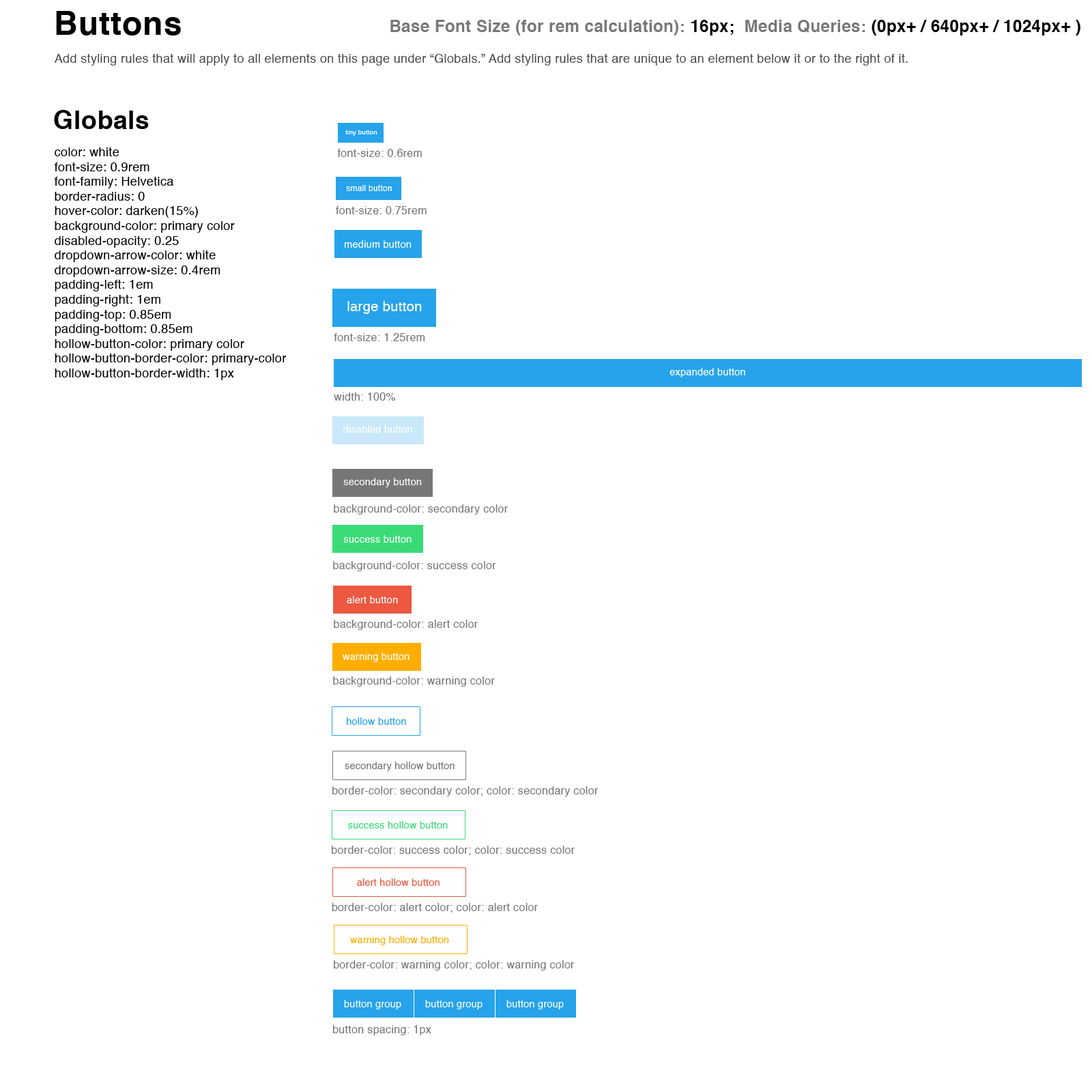
<style>
.page{position:relative;width:1092px;height:1092px;background:#ffffff}
.page>*{position:absolute;margin:0}
.t1{font:32.8px "Helvetica-Bold";letter-spacing:0.02em;color:#000000}
.t2{font:16.4px "Helvetica-Bold";letter-spacing:0.02em;color:#777777}
.t3{font:16.4px "Helvetica-Bold";letter-spacing:0.02em;color:#000000}
.t4{font:12.3px "Helvetica";letter-spacing:0.02em;color:#494949}
.t5{font:25.4px "Helvetica-Bold";letter-spacing:0.02em;color:#000000}
.t6{font:6.6px "Helvetica";letter-spacing:0.02em;color:#ffffff}
.t7{font:12.3px "Helvetica";letter-spacing:0.02em;color:#000000}
.t8{font:10.9px "Helvetica";letter-spacing:0.02em;color:#747474}
.t9{font:8.2px "Helvetica";letter-spacing:0.02em;color:#ffffff}
.t10{font:9.8px "Helvetica";letter-spacing:0.02em;color:#ffffff}
.t11{font:13.6px "Helvetica";letter-spacing:0.02em;color:#ffffff}
.t12{font:9.8px "Helvetica";letter-spacing:0.02em;color:#26a3eb}
.t13{font:9.8px "Helvetica";letter-spacing:0.02em;color:#777777}
.t14{font:9.8px "Helvetica";letter-spacing:0.02em;color:#3adb76}
.t15{font:9.8px "Helvetica";letter-spacing:0.02em;color:#ec5840}
.t16{font:9.8px "Helvetica";letter-spacing:0.02em;color:#ffae00}
</style>
<div class="page">
<p class="t1" style="left:56px;top:11px;width:125px;height:24px">Buttons</p>
<p class="t2" style="left:390px;top:20px;width:690px;height:15px">Base Font Size (for rem calculation): <span class="t3">16px;</span>  Media Queries:<span class="t3"> (0px+ / 640px+ / 1024px+ )</span></p>
<p class="t4" style="left:55px;top:54px;width:853px;height:12px">Add styling rules that will apply to all elements on this page under “Globals.” Add styling rules that are unique to an element below it or to the right of it.</p>
<p class="t5" style="left:54px;top:110px;width:95px;height:19px">Globals</p>
<p class="t6" style="left:345px;top:130px;width:32px;height:6px">tiny button</p>
<p class="t7" style="left:54px;top:147px;width:233px;height:233px">color: white<br>font-size: 0.9rem<br>font-family: Helvetica<br>border-radius: 0<br>hover-color: darken(15%)<br>background-color: primary color<br>disabled-opacity: 0.25<br>dropdown-arrow-color: white<br>dropdown-arrow-size: 0.4rem<br>padding-left: 1em<br>padding-right: 1em<br>padding-top: 0.85em<br>padding-bottom: 0.85em<br>hollow-button-color: primary color<br>hollow-button-border-color: primary-color<br>hollow-button-border-width: 1px</p>
<p class="t8" style="left:337px;top:149px;width:85px;height:8px">font-size: 0.6rem</p>
<p class="t9" style="left:346px;top:185px;width:46px;height:6px">small button</p>
<p class="t8" style="left:336px;top:206px;width:91px;height:8px">font-size: 0.75rem</p>
<p class="t10" style="left:345px;top:240px;width:67px;height:8px">medium button</p>
<p class="t11" style="left:347px;top:301px;width:75px;height:13px">large button</p>
<p class="t8" style="left:334px;top:333px;width:91px;height:8px">font-size: 1.25rem</p>
<p class="t10" style="left:670px;top:368px;width:75px;height:9px">expanded button</p>
<p class="t8" style="left:334px;top:392px;width:62px;height:9px">width: 100%</p>
<p class="t10" style="left:343px;top:425px;width:69px;height:8px">disabled button</p>
<p class="t10" style="left:343px;top:478px;width:79px;height:9px">secondary button</p>
<p class="t8" style="left:334px;top:504px;width:174px;height:11px">background-color: secondary color</p>
<p class="t10" style="left:344px;top:535px;width:68px;height:8px">success button</p>
<p class="t8" style="left:333px;top:561px;width:163px;height:10px">background-color: success color</p>
<p class="t10" style="left:347px;top:596px;width:51px;height:7px">alert button</p>
<p class="t8" style="left:334px;top:620px;width:144px;height:10px">background-color: alert color</p>
<p class="t10" style="left:343px;top:652px;width:66px;height:10px">warning button</p>
<p class="t8" style="left:333px;top:676px;width:162px;height:11px">background-color: warning color</p>
<p class="t12" style="left:347px;top:717px;width:59px;height:8px">hollow button</p>
<p class="t13" style="left:345px;top:762px;width:110px;height:9px">secondary hollow button</p>
<p class="t8" style="left:332px;top:786px;width:267px;height:10px">border-color: secondary color; color: secondary color</p>
<p class="t14" style="left:348px;top:821px;width:100px;height:8px">success hollow button</p>
<p class="t8" style="left:332px;top:846px;width:243px;height:9px">border-color: success color; color: success color</p>
<p class="t15" style="left:357px;top:878px;width:83px;height:8px">alert hollow button</p>
<p class="t8" style="left:332px;top:903px;width:206px;height:9px">border-color: alert color; color: alert color</p>
<p class="t16" style="left:350px;top:936px;width:99px;height:9px">warning hollow button</p>
<p class="t8" style="left:334px;top:960px;width:241px;height:11px">border-color: warning color; color: warning color</p>
<p class="t10" style="left:344px;top:1000px;width:57px;height:9px">button group</p>
<p class="t10" style="left:425px;top:1000px;width:58px;height:9px">button group</p>
<p class="t10" style="left:506px;top:1000px;width:58px;height:9px">button group</p>
<p class="t8" style="left:333px;top:1025px;width:98px;height:10px">button spacing: 1px</p>
</div>
